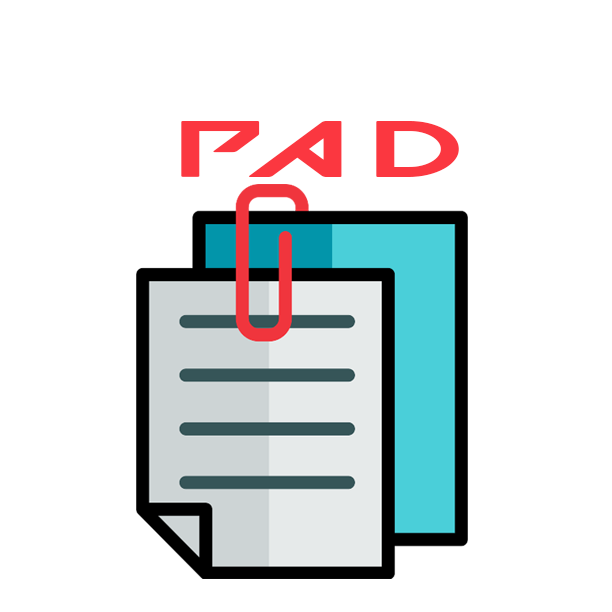
<style>
.page{position:relative;width:612px;height:612px;background:#ffffff}
.page>*{position:absolute;margin:0}
.t1{font:80px "VALORANT-Regular";letter-spacing:0.1em;color:#fb3740;scale:1.76 1}
</style>
<div class="page">
<p class="t1" style="left:181px;top:121px;width:278px;height:56px">PAD</p>
</div>
